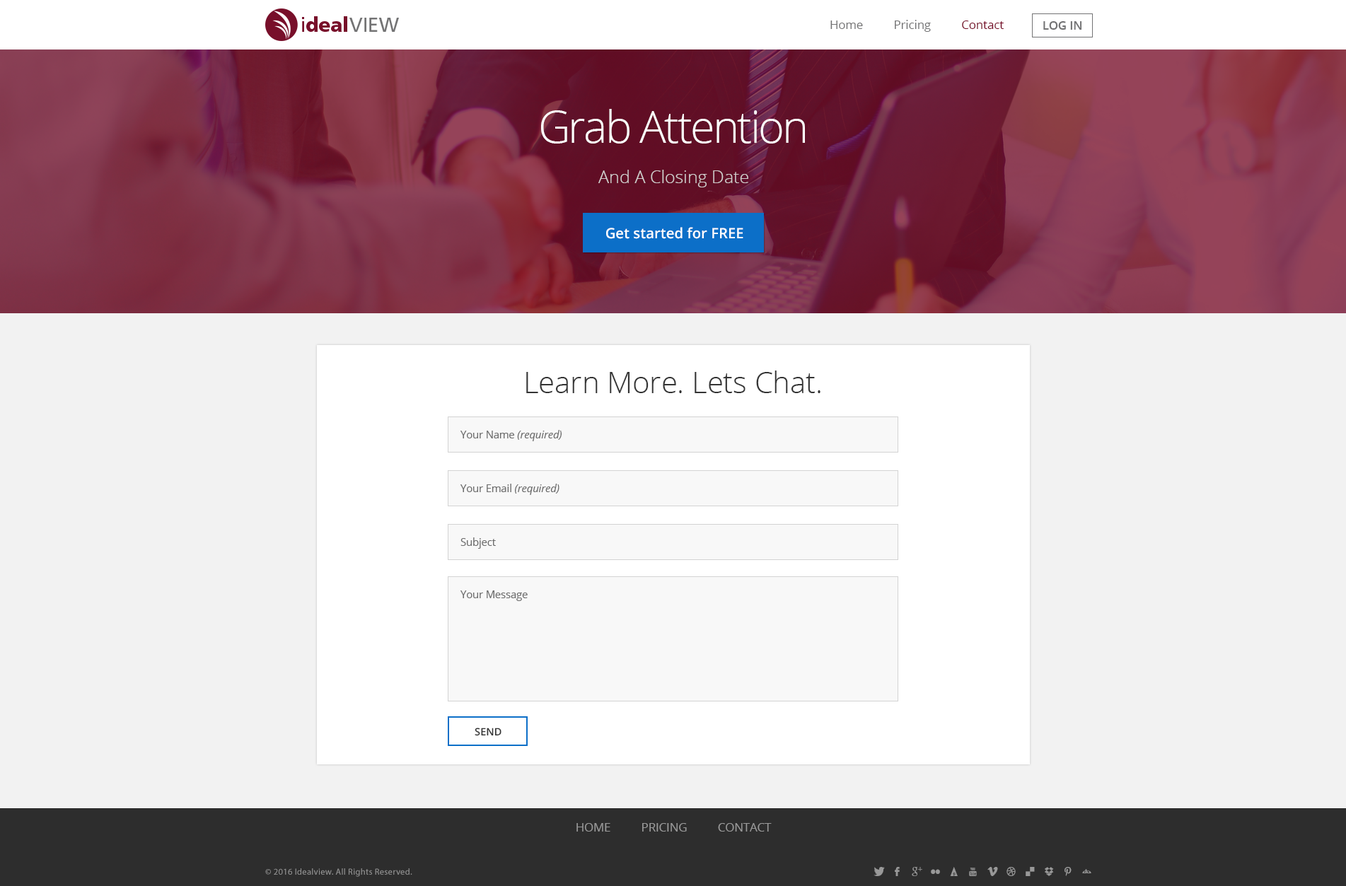
<style>
.page{position:relative;width:1346px;height:886px;background:#f2f2f2}
.page>*{position:absolute;margin:0}
.t1{font:11.8px "OpenSans";color:#737374}
.t2{font:11.8px "OpenSans";color:#780f2a}
.t3{font:11.8px "OpenSans-Semibold";color:#737374}
.t4{font:44.2px "OpenSans-Light";letter-spacing:-0.04em;color:#ffffff}
.t5{font:17.7px "OpenSans-Light";color:#d2cdcd}
.t6{font:14.3px "OpenSans-Semibold";color:#ffffff}
.t7{font:29.5px "OpenSans-Light";color:#343434}
.t8{font:10.3px "OpenSans-Italic";color:#6d6d6d}
.t9{font:10.3px "OpenSans";color:#6d6d6d}
.t10{font:10.3px "OpenSans-Semibold";color:#343434;text-transform:uppercase}
.t11{font:11.8px "OpenSans";color:#999999;text-transform:uppercase}
.t12{font:8.8px "MyriadPro-Regular";letter-spacing:0.025em;color:#999999}
</style>
<div class="page">
<p class="t1" style="left:830px;top:20px;width:173px;height:12px">Home          Pricing          <span class="t2">Contact</span></p>
<p class="t3" style="left:1043px;top:21px;width:39px;height:9px">LOG IN</p>
<p class="t4" style="left:541px;top:109px;width:264px;height:35px">Grab Attention</p>
<p class="t5" style="left:598px;top:170px;width:150px;height:17px">And A Closing Date</p>
<p class="t6" style="left:606px;top:227px;width:137px;height:12px">Get started for FREE</p>
<p class="t7" style="left:526px;top:371px;width:294px;height:22px">Learn More. Lets Chat.</p>
<p class="t8" style="left:460px;top:430px;width:101px;height:11px"><span class="t9">Your Name </span>(required)</p>
<p class="t9" style="left:460px;top:484px;width:99px;height:11px">Your Email <span class="t8">(required)</span></p>
<p class="t9" style="left:460px;top:537px;width:36px;height:12px">Subject</p>
<p class="t9" style="left:460px;top:590px;width:68px;height:11px">Your Message</p>
<p class="t10" style="left:475px;top:728px;width:26px;height:8px">send</p>
<p class="t11" style="left:576px;top:823px;width:196px;height:9px">Home          Pricing          Contact</p>
<p class="t12" style="left:265px;top:868px;width:147px;height:9px">© 2016 Idealview. All Rights Reserved.</p>
</div>
